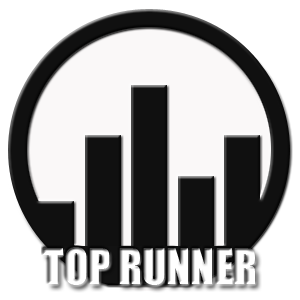
<style>
.page{position:relative;width:300px;height:300px;background:#ffffff}
.page>*{position:absolute;margin:0}
.t1{font:44.7px "Impact";color:#ffffff}
</style>
<div class="page">
<p class="t1" style="left:43px;top:247px;width:212px;height:38px">TOP RUNNER</p>
</div>
